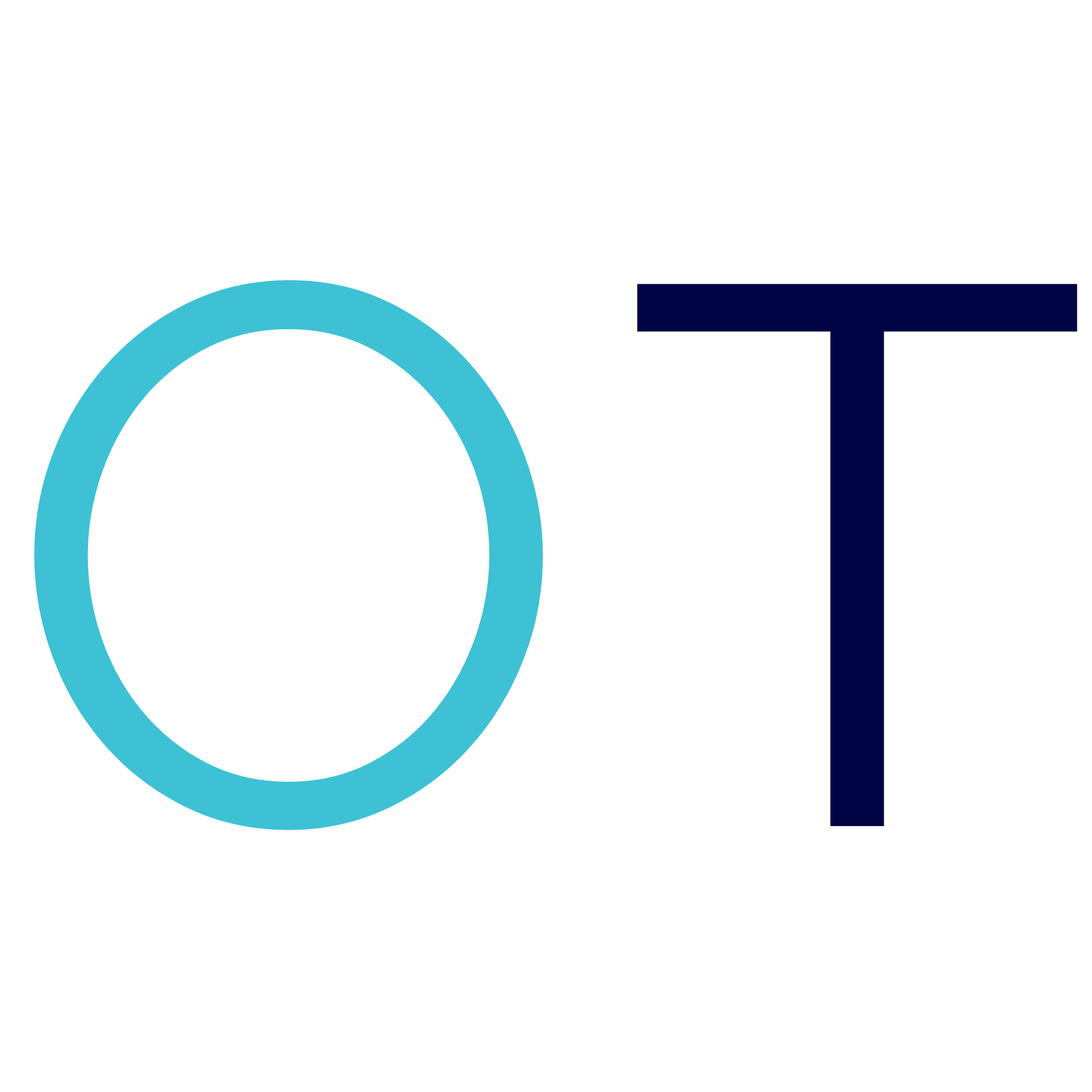
<style>
.page{position:relative;width:1092px;height:1092px;background:#ffffff}
.page>*{position:absolute;margin:0}
.t1{font:763.5px "Raleway";letter-spacing:0.06em;color:#3ec1d5}
.t2{font:763.5px "Raleway";letter-spacing:0.06em;color:#000444}
</style>
<div class="page">
<p class="t1" style="left:34px;top:280px;width:1043px;height:550px">O<span class="t2">T</span></p>
</div>
